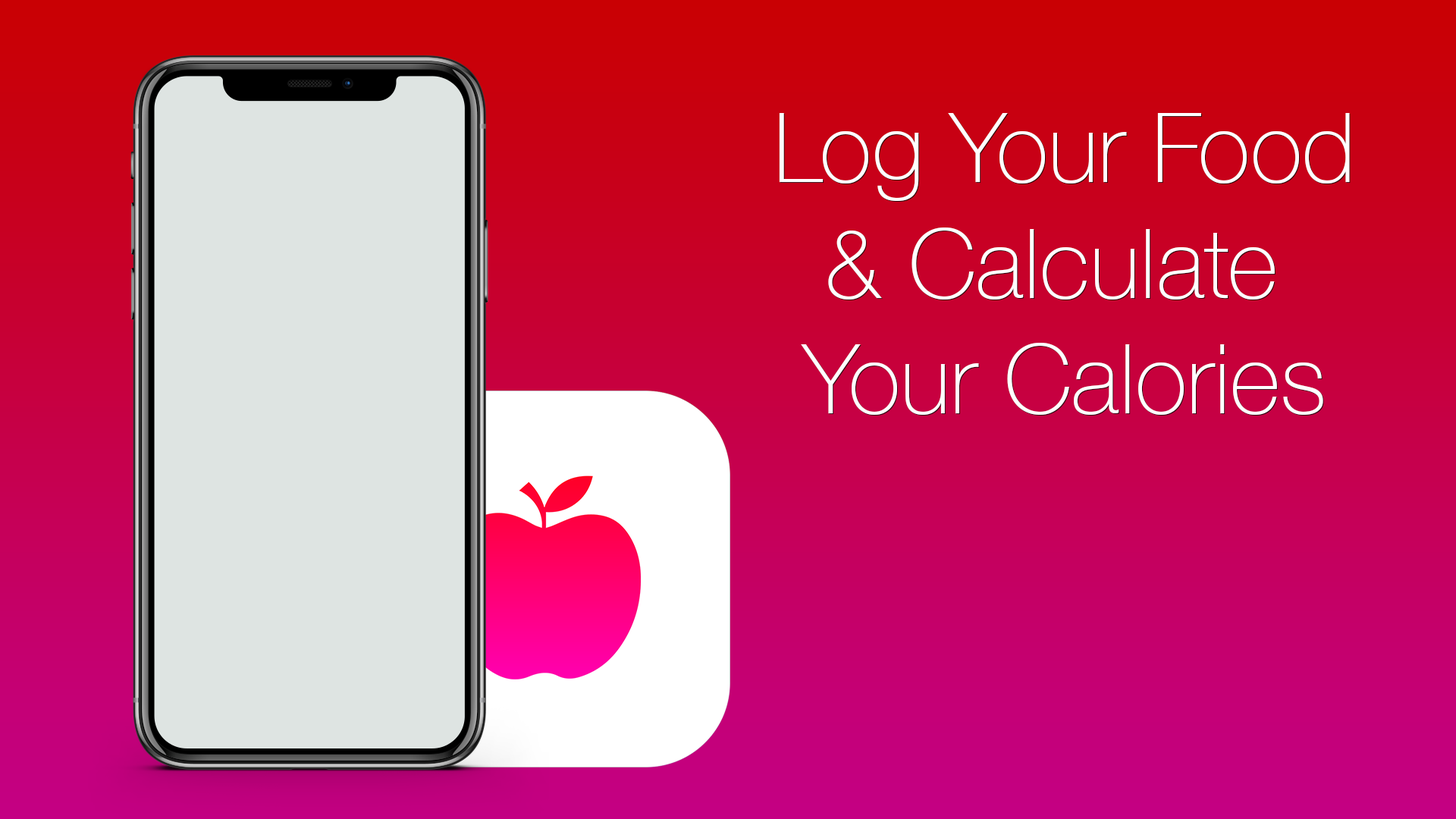
<style>
.page{position:relative;width:1456px;height:819px}
.page>*{position:absolute;margin:0}
.t1{font:96.5px "HelveticaNeue-Thin";color:#ffffff}
</style>
<div class="page">
<p class="t1" style="left:779px;top:113px;width:571px;height:302px;text-align:center">Log Your Food<br>&amp; Calculate <br>Your Calories</p>
</div>
